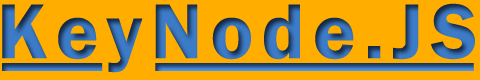
<style>
.page{position:relative;width:480px;height:80px;background:#ffae00}
.page>*{position:absolute;margin:0}
.t1{font:80.3px "FranklinGothic-Demi";letter-spacing:0.1em}
</style>
<div class="page">
<p class="t1" style="left:2px;top:3px;width:473px;height:70px">KeyNode.JS</p>
</div>
